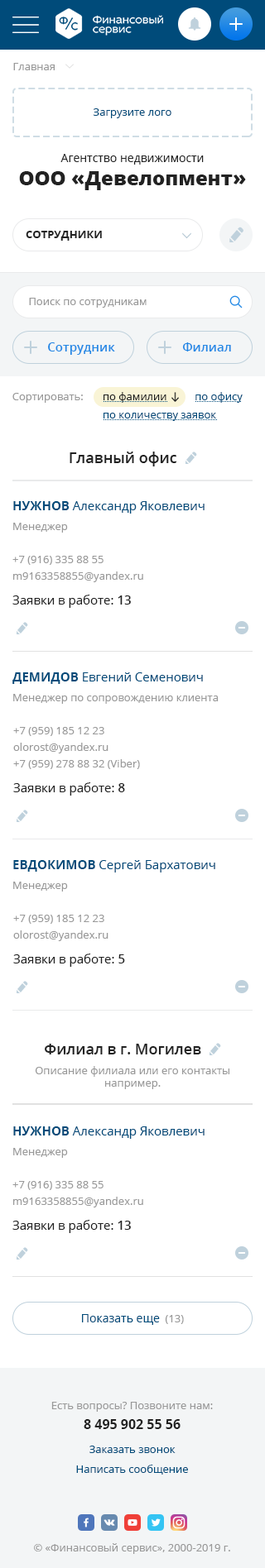
<style>
.page{position:relative;width:265px;height:1568px;background:#ffffff}
.page>*{position:absolute;margin:0}
.t1{font:10.8px "OpenSans";color:#999999}
.t2{font:10.8px "OpenSans";color:#004b7a}
.t3{font:11.6px "OpenSans";color:#222222}
.t4{font:19.8px "OpenSans-Extrabold";color:#222222}
.t5{font:10.8px "OpenSans-Bold";color:#222222;text-transform:uppercase}
.t6{font:12.4px "OpenSans-Semibold";color:#2389e5}
.t7{font:10.8px/18.2px "OpenSans";color:#004b7a}
.t8{font:10.8px/18.2px "OpenSans";color:#222222}
.t9{font:14.9px "OpenSans-Semibold";color:#222222}
.t10{font:12.4px "OpenSans";color:#004b7a}
.t11{font:12.4px "OpenSans-Bold";color:#004b7a;text-transform:uppercase}
.t12{font:10.8px/19.8px "OpenSans";color:#999999}
.t13{font:10.8px/16.5px "OpenSans";color:#999999}
.t14{font:12.4px/24.8px "OpenSans";color:#222222}
.t15{font:12.4px/24.8px "OpenSans-Semibold";color:#222222}
.t16{font:11.6px "OpenSans";color:#004b7a}
.t17{font:13.2px/19.8px "OpenSans-Bold";color:#222222}
.t18{font:10.8px/19.8px "OpenSans";color:#004b7a}
</style>
<div class="page">
<p class="t1" style="left:13px;top:63px;width:42px;height:7px">Главная</p>
<p class="t2" style="left:93px;top:108px;width:78px;height:10px">Загрузите лого</p>
<p class="t3" style="left:60px;top:154px;width:143px;height:11px">Агентство недвижимости</p>
<p class="t4" style="left:19px;top:171px;width:227px;height:19px">ООО «Девелопмент»</p>
<p class="t5" style="left:26px;top:231px;width:76px;height:10px">сотрудники</p>
<p class="t1" style="left:29px;top:298px;width:117px;height:10px">Поиск по сотрудникам</p>
<p class="t6" style="left:48px;top:342px;width:67px;height:13px">Сотрудник</p>
<p class="t6" style="left:182px;top:342px;width:49px;height:9px">Филиал</p>
<p class="t1" style="left:12px;top:393px;width:71px;height:10px">Сортировать:</p>
<p class="t7" style="left:103px;top:392px;width:139px;height:29px"><span class="t8">по фамилии          </span>по офису       <br>по количеству заявок</p>
<p class="t9" style="left:69px;top:452px;width:107px;height:14px">Главный офис</p>
<p class="t10" style="left:13px;top:501px;width:191px;height:32px"><span class="t11">Нужнов </span>Александр Яковлевич<br><span class="t12">Менеджер</span></p>
<p class="t13" style="left:12px;top:556px;width:131px;height:52px"><span class="t12">+7 (916) 335 88 55        <br></span>m9163358855@yandex.ru<br><span class="t14">Заявки в работе: </span><span class="t15">13</span></p>
<p class="t12" style="left:12px;top:672px;width:206px;height:32px"><span class="t11">Демидов </span><span class="t10">Евгений Семенович<br></span>Менеджер по сопровождению клиента</p>
<p class="t13" style="left:13px;top:727px;width:127px;height:69px">+7 (959) 185 12 23        <br>olorost@yandex.ru<br>+7 (959) 278 88 32 (Viber)<br><span class="t14">Заявки в работе: </span><span class="t15">8</span></p>
<p class="t10" style="left:13px;top:860px;width:202px;height:32px"><span class="t11">Евдокимов </span>Сергей Бархатович<br><span class="t12">Менеджер</span></p>
<p class="t13" style="left:13px;top:915px;width:112px;height:52px">+7 (959) 185 12 23        <br>olorost@yandex.ru<br><span class="t14">Заявки в работе: </span><span class="t15">5</span></p>
<p class="t9" style="left:45px;top:1044px;width:156px;height:10px">Филиал в г. Могилев</p>
<p class="t1" style="left:35px;top:1066px;width:194px;height:23px"><span class="t9"> <br></span>Описание филиала или его контакты например.</p>
<p class="t10" style="left:13px;top:1126px;width:191px;height:32px"><span class="t11">Нужнов </span>Александр Яковлевич<br><span class="t12">Менеджер</span></p>
<p class="t13" style="left:12px;top:1181px;width:131px;height:52px"><span class="t12">+7 (916) 335 88 55        <br></span>m9163358855@yandex.ru<br><span class="t14">Заявки в работе: </span><span class="t15">13</span></p>
<p class="t16" style="left:82px;top:1314px;width:102px;height:11px">Показать еще <span class="t1"> (13)</span></p>
<p class="t12" style="left:51px;top:1402px;width:162px;height:27px;text-align:center">Есть вопросы? Позвоните нам:<br><span class="t17">8 495 902 55 56</span></p>
<p class="t18" style="left:76px;top:1446px;width:112px;height:29px;text-align:center">Заказать звонок          <br>Написать сообщение</p>
<p class="t1" style="left:34px;top:1543px;width:196px;height:11px">© «Финансовый сервис», 2000-2019 г.</p>
</div>
